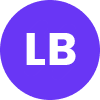
<style>
.page{position:relative;width:100px;height:100px;background:#6936f5}
.page>*{position:absolute;margin:0}
.t1{font:45.7px "Poppins-Bold";letter-spacing:0.025em;color:#ffffff}
</style>
<div class="page">
<p class="t1" style="left:26px;top:33px;width:50px;height:32px">LB</p>
</div>
